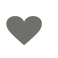
<style>
.page{position:relative;width:58px;height:58px;background:#ffffff}
.page>*{position:absolute;margin:0}
.t1{font:36.1px "KozGoPr6N-Regular";color:#706f6b;scale:1.23 1}
</style>
<div class="page">
<p class="t1" style="left:6px;top:16px;width:36px;height:30px">♥</p>
</div>
